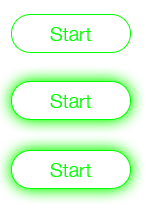
<style>
.page{position:relative;width:146px;height:204px;background:#ffffff}
.page>*{position:absolute;margin:0}
.t1{font:20px "HelveticaNeue-Light";color:#00ff00}
</style>
<div class="page">
<p class="t1" style="left:50px;top:27px;width:41px;height:14px">Start</p>
<p class="t1" style="left:50px;top:94px;width:41px;height:14px">Start</p>
<p class="t1" style="left:50px;top:163px;width:41px;height:14px">Start</p>
</div>
